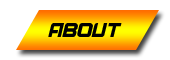
<style>
.page{position:relative;width:170px;height:60px;background:#ffffff}
.page>*{position:absolute;margin:0}
.t1{font:21.2px "Spantaran";color:#000000}
</style>
<div class="page">
<p class="t1" style="left:48px;top:23px;width:74px;height:14px">ABOUT</p>
</div>
